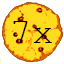
<style>
.page{position:relative;width:64px;height:64px;background:#ffffff}
.page>*{position:absolute;margin:0}
.t1{font:36px "CourierNewPSMT";color:#000000}
</style>
<div class="page">
<p class="t1" style="left:13px;top:21px;width:39px;height:22px">7x</p>
</div>
